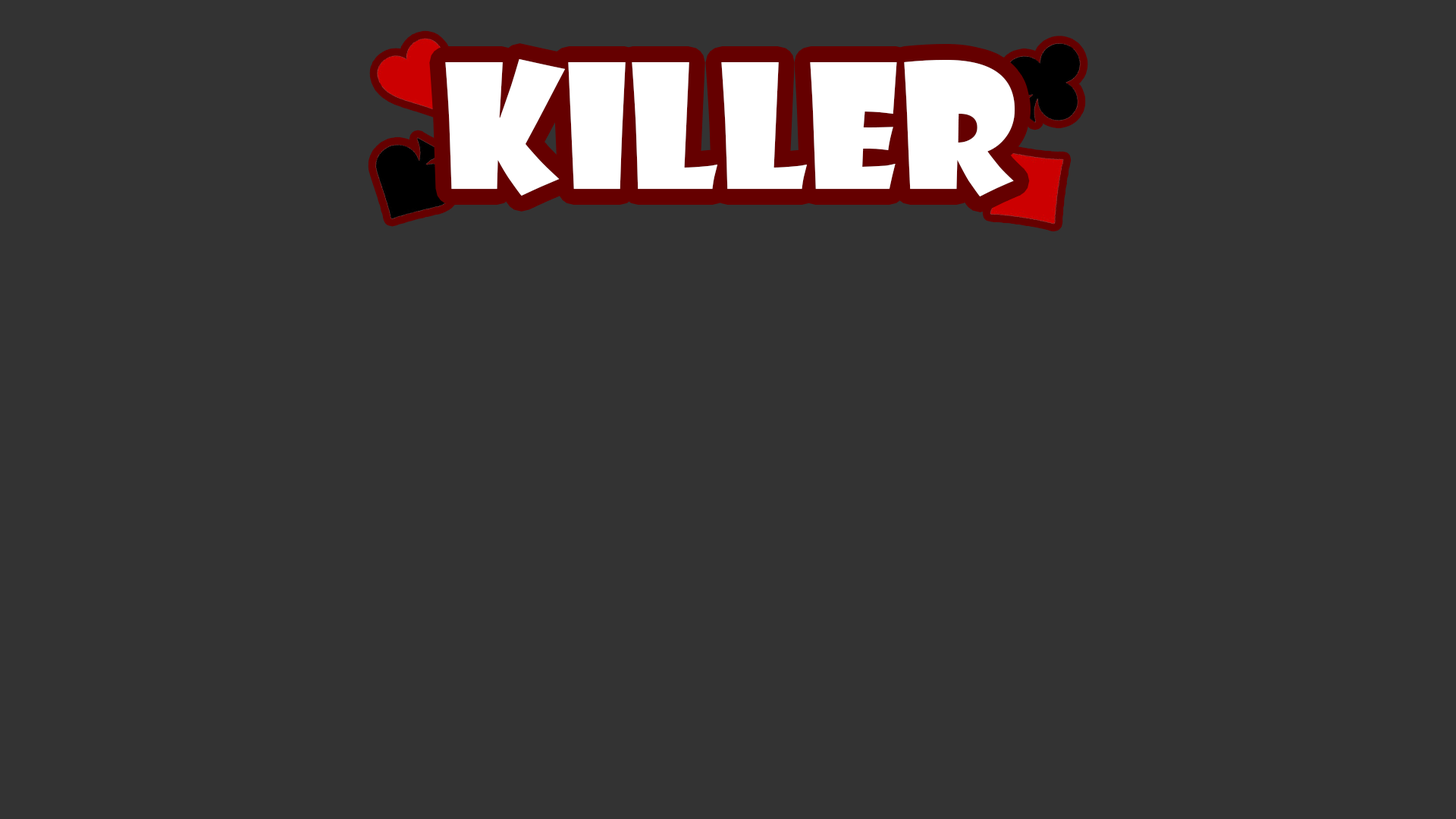
<style>
.page{position:relative;width:1456px;height:819px;background:#333333}
.page>*{position:absolute;margin:0}
.t1{font:168.2px "ShowcardGothic-Reg";color:#ffffff}
</style>
<div class="page">
<p class="t1" style="left:445px;top:59px;width:570px;height:137px">Killer</p>
</div>
